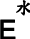
<style>
.page{position:relative;width:30px;height:39px;background:#ffffff}
.page>*{position:absolute;margin:0}
.t1{font:27px "ArialMT";color:#000000;font-weight:bold}
</style>
<div class="page">
<p class="t1" style="left:0px;top:19px;width:16px;height:21px">E</p>
</div>
